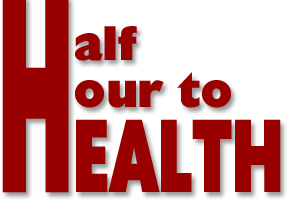
<style>
.page{position:relative;width:300px;height:200px;background:#ffffff}
.page>*{position:absolute;margin:0}
.t1{font:48px "Herald";letter-spacing:0.025em;color:#990000}
.t2{font:103.1px "Herald";letter-spacing:0.025em;color:#990000;scale:0.59 1}
</style>
<div class="page">
<p class="t1" style="left:75px;top:26px;width:62px;height:35px">alf</p>
<p class="t1" style="left:75px;top:72px;width:156px;height:36px">our to</p>
<p class="t2" style="left:76px;top:119px;width:205px;height:73px">EALTH</p>
</div>
